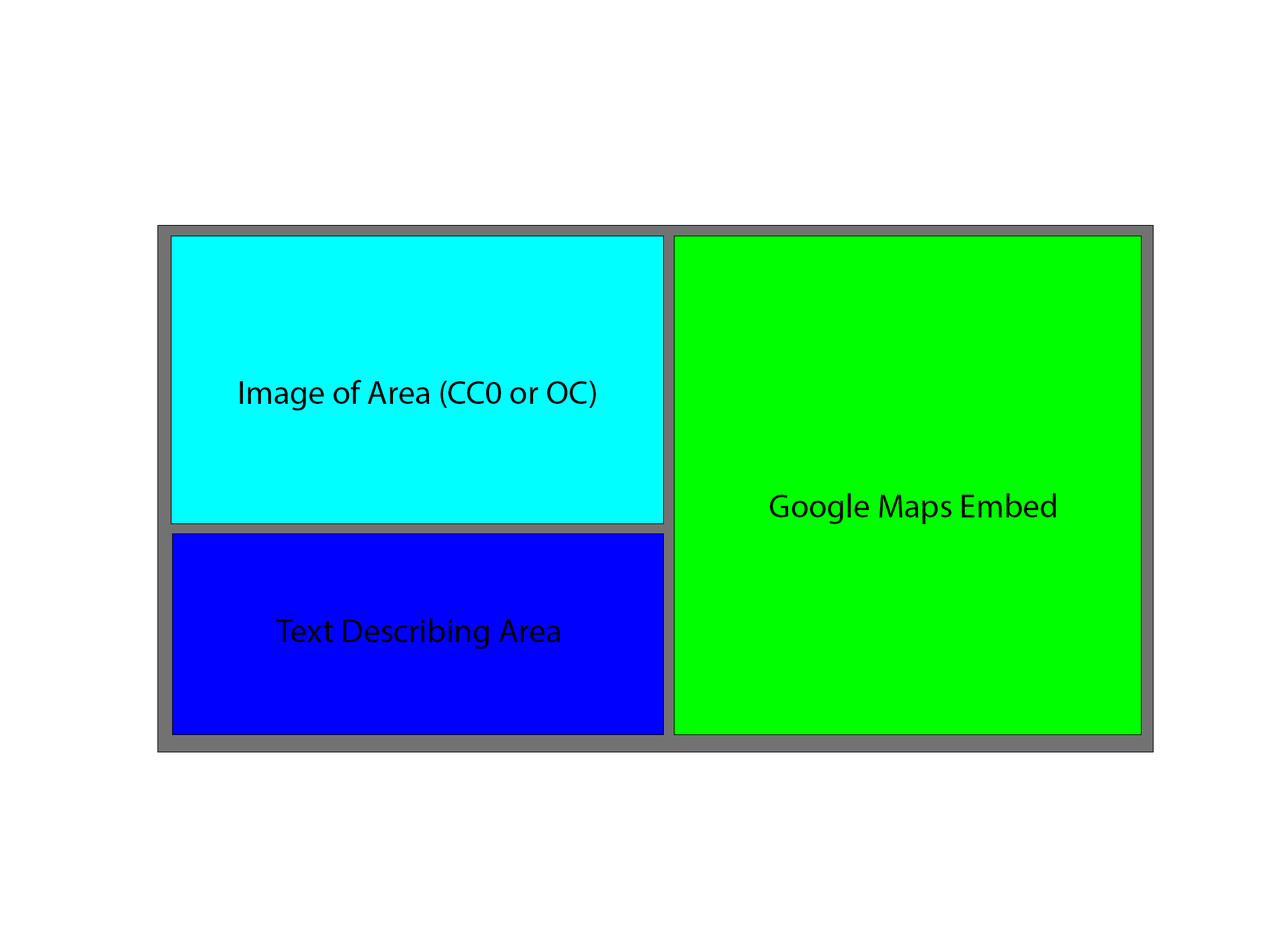
<style>
.page{position:relative;width:1261px;height:946px;background:#ffffff}
.page>*{position:absolute;margin:0}
.t1{font:33.4px "MyriadPro-Regular";color:#000000}
</style>
<div class="page">
<p class="t1" style="left:240px;top:380px;width:356px;height:30px">Image of Area (CC0 or OC)</p>
<p class="t1" style="left:770px;top:493px;width:286px;height:31px">Google Maps Embed</p>
<p class="t1" style="left:276px;top:618px;width:285px;height:31px">Text Describing Area</p>
</div>
